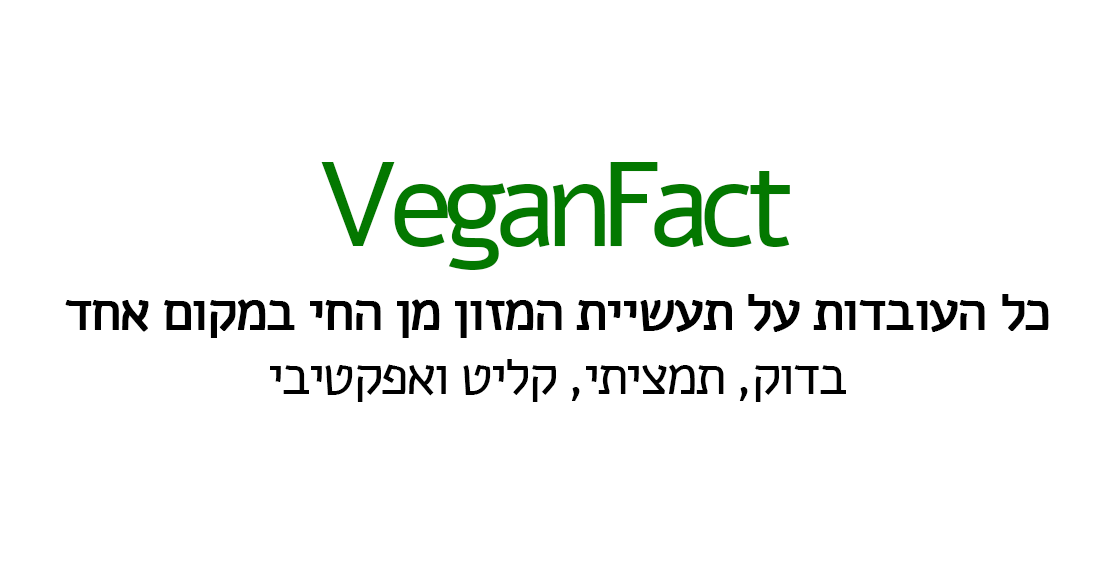
<style>
.page{position:relative;width:1111px;height:584px;background:#ffffff}
.page>*{position:absolute;margin:0}
.t1{font:120.2px "Alef-Regular";letter-spacing:-0.1em;color:#037800}
.t2{font:54.7px "Alef-Regular";letter-spacing:-0.06em;color:#000000;font-weight:bold}
.t3{font:54.7px "Alef-Regular";letter-spacing:-0.06em;color:#000000}
</style>
<div class="page">
<p class="t1" style="left:321px;top:162px;width:469px;height:108px">VeganFact</p>
<p class="t2" style="left:65px;top:294px;width:984px;height:108px;text-align:center">כל העובדות על תעשיית המזון מן החי במקום אחד<br><span class="t3">בדוק, תמציתי, קליט ואפקטיבי</span></p>
</div>
